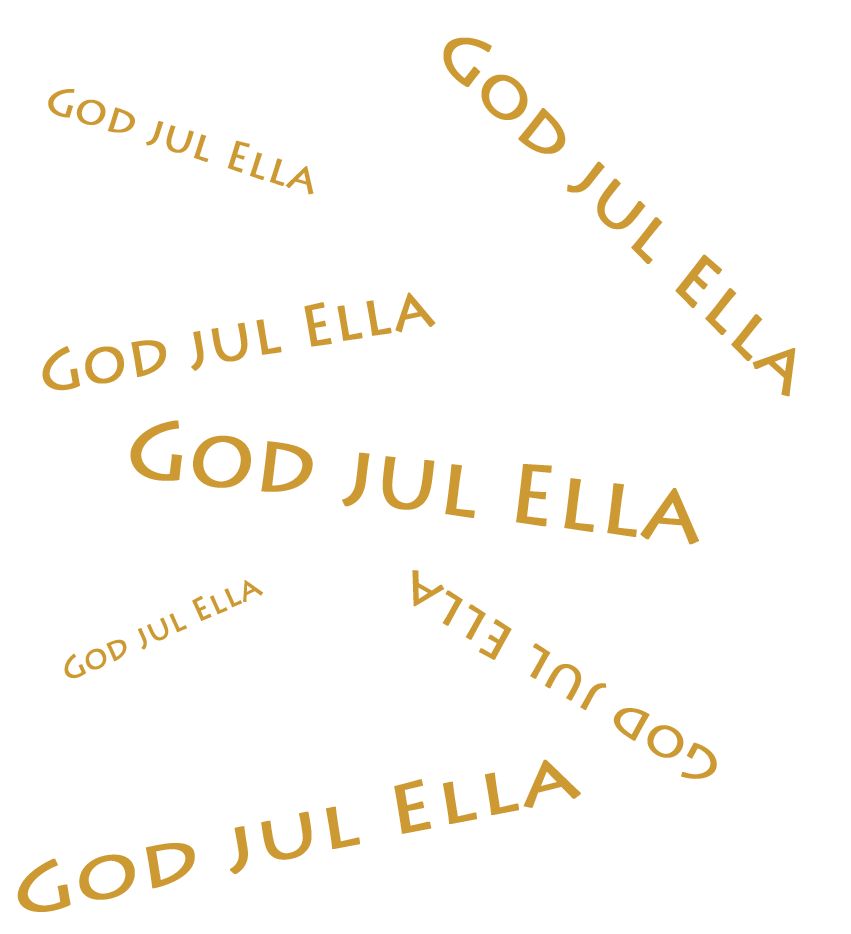
<style>
.page{position:relative;width:851px;height:934px;background:#ffffff}
.page>*{position:absolute;margin:0}
.t1{font:64.4px "LithosPro-Regular";color:#cc9933;font-weight:bold;scale:1.09 1}
.t2{font:40.4px "LithosPro-Regular";color:#cc9933;font-weight:bold}
.t3{font:57px "LithosPro-Regular";color:#cc9933;font-weight:bold}
.t4{font:82.8px "LithosPro-Regular";color:#cc9933;font-weight:bold}
.t5{font:30.8px "LithosPro-Regular";color:#cc9933;font-weight:bold}
.t6{font:50px "LithosPro-Regular";color:#cc9933;font-weight:bold;scale:1.05 1}
.t7{font:67px "LithosPro-Regular";color:#cc9933;font-weight:bold;scale:1.23 1}
</style>
<div class="page">
<p class="t1" style="left:443px;top:37px;width:353px;height:360px;rotate:44deg">God jul Ella</p>
<p class="t2" style="left:48px;top:89px;width:266px;height:106px;rotate:17deg">God jul Ella</p>
<p class="t3" style="left:42px;top:292px;width:394px;height:99px;rotate:-10deg">God jul Ella</p>
<p class="t4" style="left:130px;top:420px;width:569px;height:125px;rotate:7deg">God jul Ella</p>
<p class="t5" style="left:64px;top:580px;width:199px;height:99px;rotate:-24deg">God jul Ella</p>
<p class="t6" style="left:412px;top:570px;width:305px;height:209px;rotate:-148deg">God jul Ella</p>
<p class="t7" style="left:17px;top:759px;width:564px;height:153px;rotate:-12deg">God jul Ella</p>
</div>
